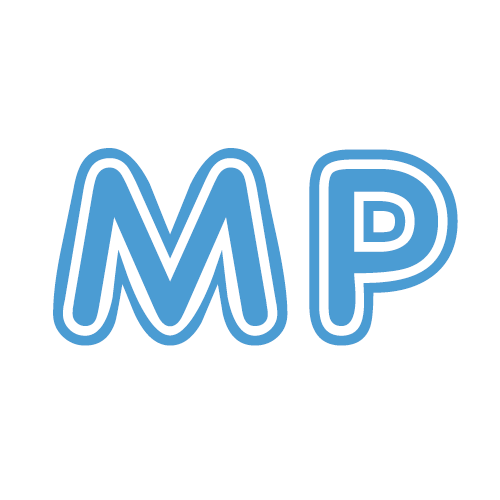
<style>
.page{position:relative;width:500px;height:500px;background:#ffffff}
.page>*{position:absolute;margin:0}
.t1{font:500px "ARDELANEY";color:#4b9cd3}
</style>
<div class="page">
<p class="t1" style="left:53px;top:148px;width:405px;height:198px">MP</p>
</div>
